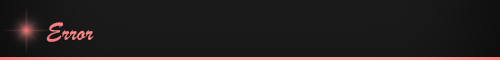
<style>
.page{position:relative;width:500px;height:60px;background:#1a1a1a}
.page>*{position:absolute;margin:0}
.t1{font:26px "BrushScriptMT";color:#ff8082}
</style>
<div class="page">
<p class="t1" style="left:46px;top:22px;width:48px;height:20px">Error</p>
</div>
